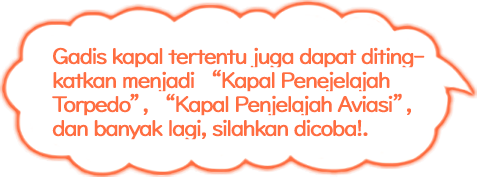
<style>
.page{position:relative;width:477px;height:177px;background:#ffffff}
.page>*{position:absolute;margin:0}
.t1{font:22px/24px "UDDigiKyokashoNP-R";letter-spacing:-0.08em;color:#ff6e40;font-weight:bold}
</style>
<div class="page">
<p class="t1" style="left:52px;top:47px;width:373px;height:93px">Gadis kapal tertentu juga dapat diting-<br>katkan menjadi “Kapal Penejelajah<br>Torpedo”, “Kapal Penjelajah Aviasi”,<br>dan banyak lagi, silahkan dicoba!.</p>
</div>
